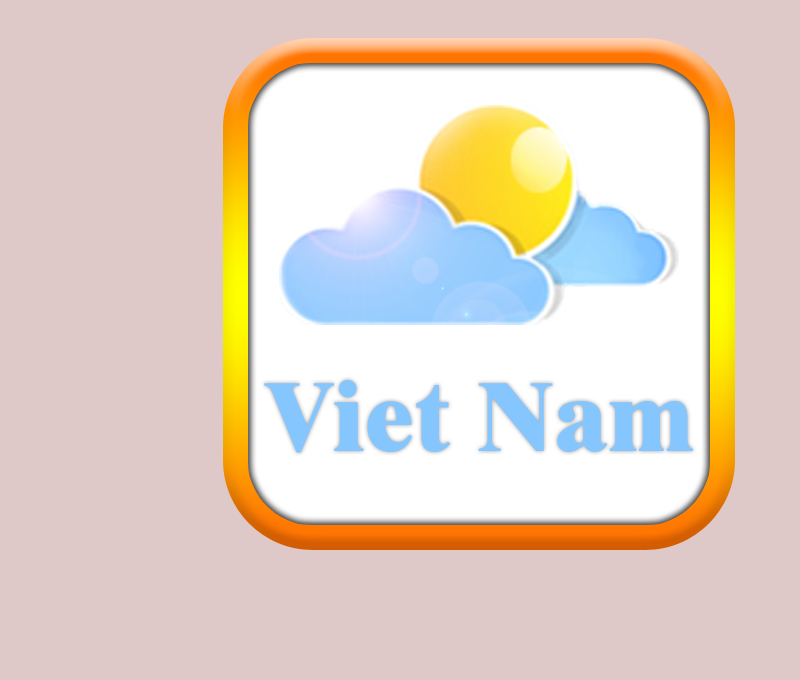
<style>
.page{position:relative;width:800px;height:680px;background:#dec8c8}
.page>*{position:absolute;margin:0}
.t1{font:100px "UVNThoiNayNang";color:#85c6fe}
</style>
<div class="page">
<p class="t1" style="left:264px;top:380px;width:429px;height:73px">Viet Nam</p>
</div>
